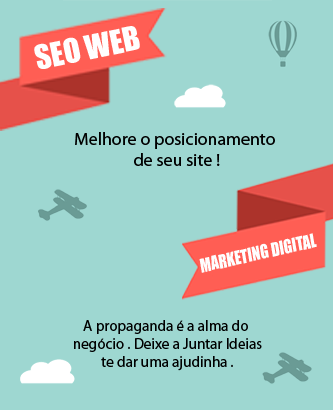
<style>
.page{position:relative;width:333px;height:410px;background:#9ed7d1}
.page>*{position:absolute;margin:0}
.t1{font:30.9px "Impact";color:#fffefe}
.t2{font:17.9px "MyriadPro-Regular";color:#000000}
.t3{font:17.7px "Impact";color:#fefefe;scale:0.87 1}
.t4{font:15.1px "MyriadPro-Regular";color:#000000}
</style>
<div class="page">
<p class="t1" style="left:34px;top:26px;width:106px;height:43px;rotate:-12deg">SEO WEB</p>
<p class="t2" style="left:75px;top:132px;width:200px;height:34px;text-align:center">Melhore o posicionamento <br>de seu site !</p>
<p class="t3" style="left:199px;top:233px;width:118px;height:40px;rotate:-13deg">MARKETING DIGITAL</p>
<p class="t4" style="left:74px;top:320px;width:188px;height:51px;text-align:center">A propaganda é a alma do <br>negócio . Deixe a Juntar Ideias<br>te dar uma ajudinha .</p>
</div>
